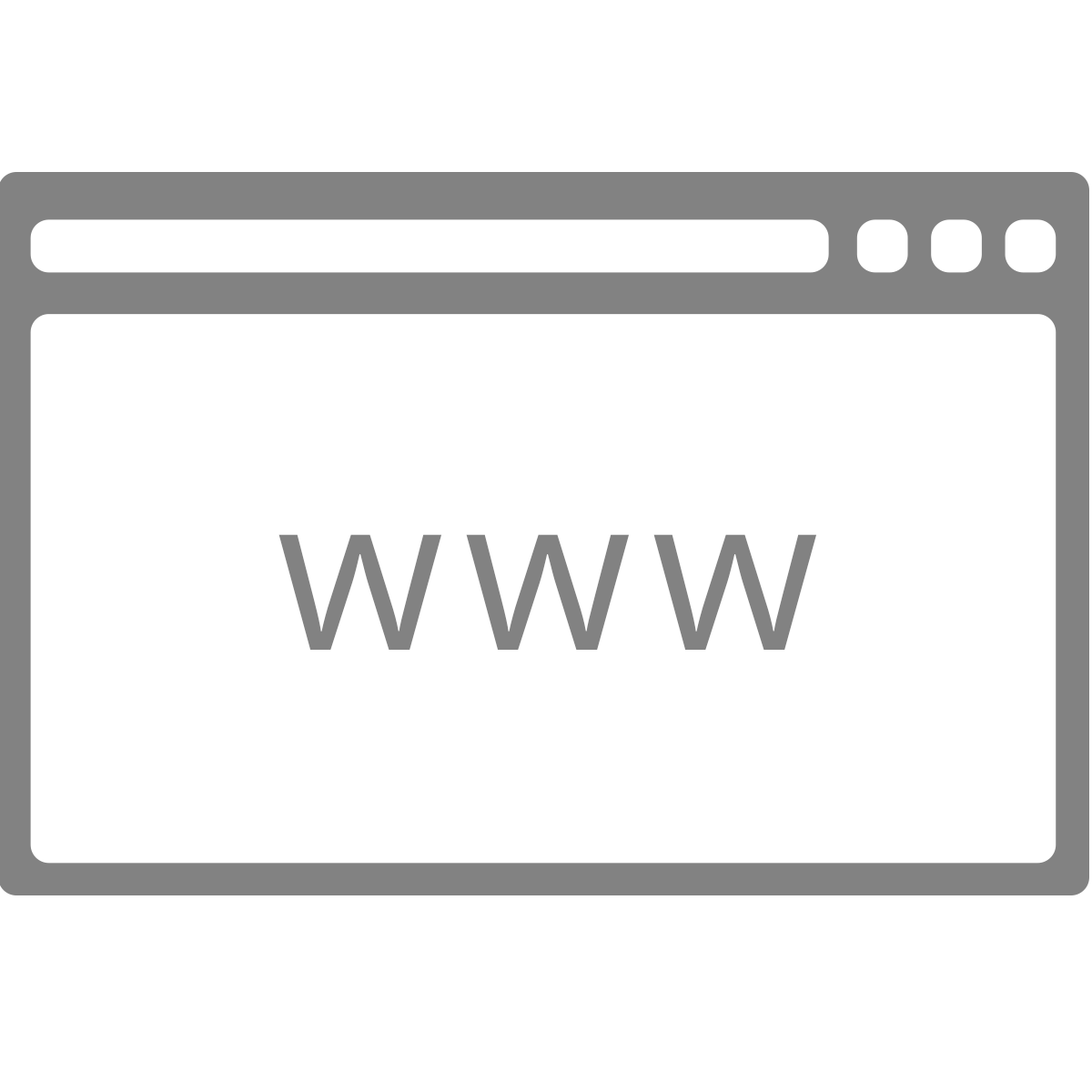
<style>
.page{position:relative;width:1092px;height:1092px;background:#ffffff}
.page>*{position:absolute;margin:0}
.t1{font:214.8px "OpenSans";letter-spacing:0.095em;color:#828282}
</style>
<div class="page">
<p class="t1" style="left:278px;top:534px;width:539px;height:116px">www</p>
</div>
